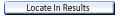
<style>
.page{position:relative;width:120px;height:20px;background:#ffffff}
.page>*{position:absolute;margin:0}
.t1{font:10px "MyriadPro-Regular";letter-spacing:0.005em;scale:0.9 1}
</style>
<div class="page">
<p class="t1" style="left:27px;top:3px;width:63px;height:8px">Locate In Results</p>
</div>
